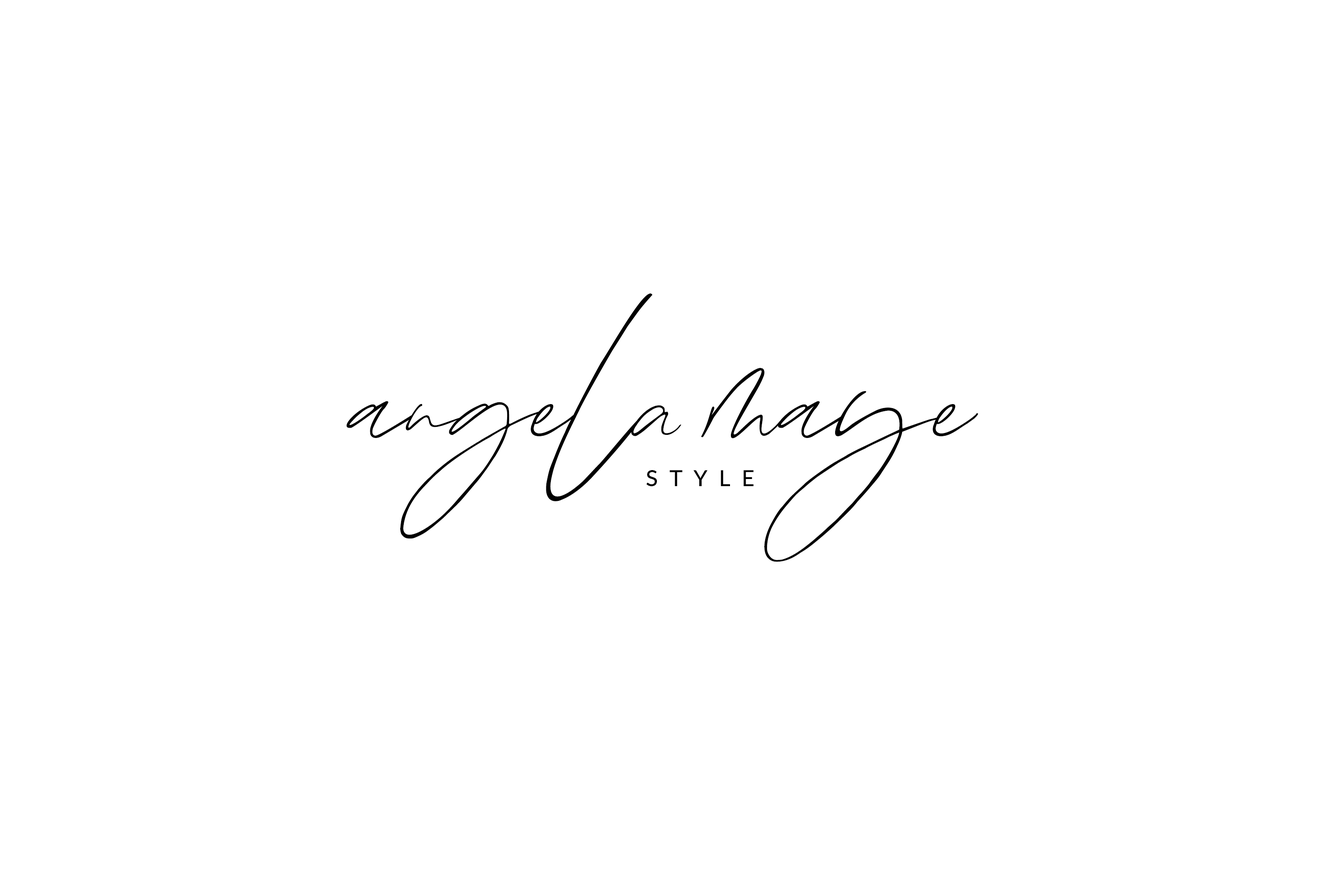
<style>
.page{position:relative;width:1337px;height:892px;background:#ffffff}
.page>*{position:absolute;margin:0}
.t1{font:352.9px "xoBabe-Regular";color:#000000}
.t2{font:22.3px "Lato-Medium";letter-spacing:0.5em;color:#000000;text-transform:uppercase}
</style>
<div class="page">
<p class="t1" style="left:346px;top:293px;width:633px;height:269px">angela maye</p>
<p class="t2" style="left:646px;top:470px;width:108px;height:16px">style</p>
</div>
